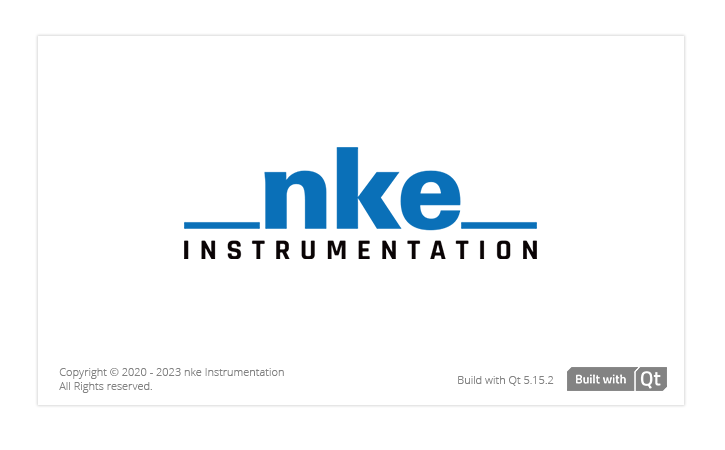
<style>
.page{position:relative;width:725px;height:450px;background:#ffffff}
.page>*{position:absolute;margin:0}
.t1{font:11px "OpenSans-Light";color:#838383}
</style>
<div class="page">
<p class="t1" style="left:59px;top:368px;width:225px;height:25px">Copyright © 2020 - 2023 nke Instrumentation<br>All Rights reserved.</p>
<p class="t1" style="left:458px;top:376px;width:96px;height:10px">Build with Qt 5.15.2</p>
</div>
